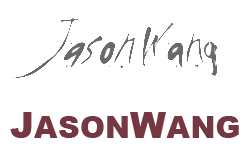
<style>
.page{position:relative;width:250px;height:162px;background:#ffffff}
.page>*{position:absolute;margin:0}
.t1{font:30px "Arial-Black";letter-spacing:0.01em;color:#753842}
.t2{font:36px "Arial-Black";letter-spacing:0.01em;color:#753842}
</style>
<div class="page">
<p class="t1" style="left:10px;top:112px;width:229px;height:26px"><span class="t2">J</span>ASON<span class="t2">W</span>ANG</p>
</div>
